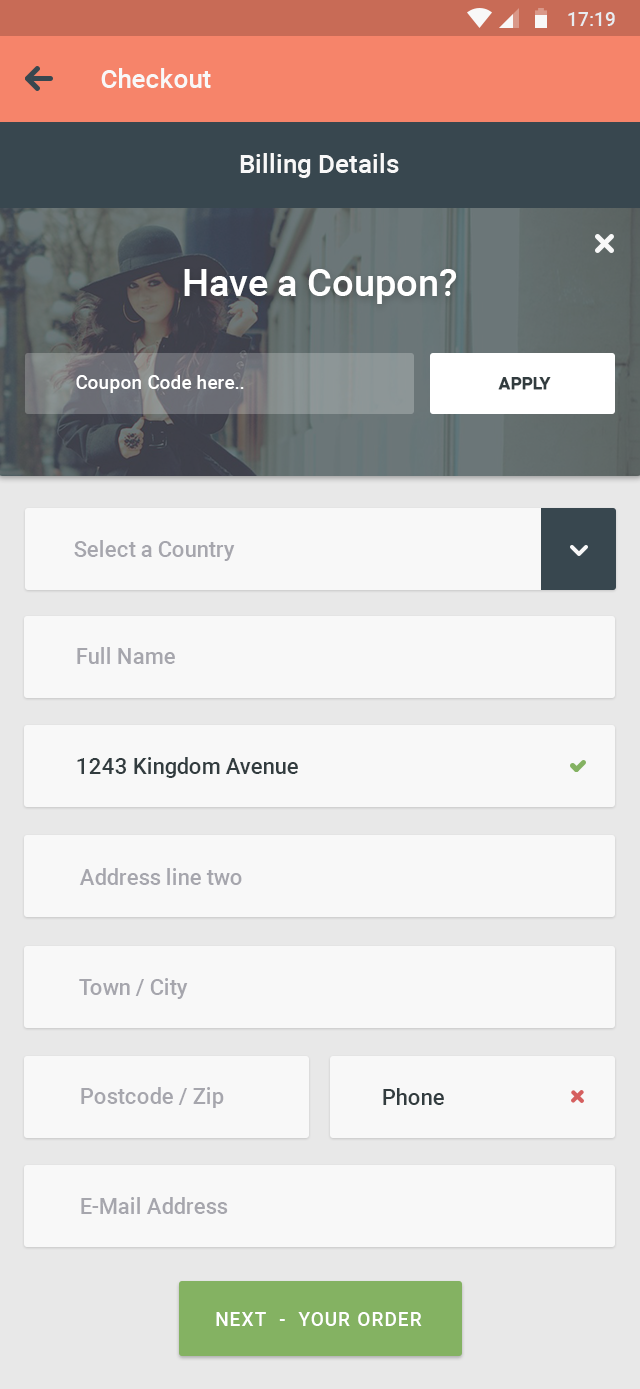
<style>
.page{position:relative;width:640px;height:1389px;background:#f8f8f8}
.page>*{position:absolute;margin:0}
.t1{font:19px "Roboto-Medium";color:#e8ecf0}
.t2{font:26px "Roboto-Medium";color:#f8f8f8}
.t3{font:38px "Roboto-Medium";color:#ffffff}
.t4{font:19px "Roboto-Medium";color:#ffffff}
.t5{font:17px "Roboto-Medium";color:#323c3f;font-weight:bold}
.t6{font:22px "Roboto-Medium";color:#a6a6ad}
.t7{font:22px "Roboto-Medium";color:#323c3f}
.t8{font:19px "Roboto-Medium";letter-spacing:0.06em;color:#ffffff;text-transform:uppercase}
</style>
<div class="page">
<p class="t1" style="left:568px;top:12px;width:47px;height:14px">17:19</p>
<p class="t2" style="left:101px;top:68px;width:110px;height:20px">Checkout</p>
<p class="t2" style="left:240px;top:153px;width:159px;height:25px">Billing Details</p>
<p class="t3" style="left:184px;top:269px;width:273px;height:35px">Have a Coupon?</p>
<p class="t4" style="left:76px;top:375px;width:168px;height:18px">Coupon Code here..</p>
<p class="t5" style="left:498px;top:377px;width:53px;height:13px">APPLY</p>
<p class="t6" style="left:74px;top:540px;width:161px;height:21px">Select a Country</p>
<p class="t6" style="left:77px;top:647px;width:98px;height:17px">Full Name</p>
<p class="t7" style="left:77px;top:757px;width:221px;height:21px">1243 Kingdom Avenue</p>
<p class="t6" style="left:79px;top:868px;width:163px;height:17px">Address line two</p>
<p class="t6" style="left:79px;top:978px;width:109px;height:21px">Town / City</p>
<p class="t6" style="left:81px;top:1087px;width:143px;height:21px">Postcode / Zip</p>
<p class="t7" style="left:383px;top:1088px;width:61px;height:17px">Phone</p>
<p class="t6" style="left:81px;top:1197px;width:147px;height:17px">E-Mail Address</p>
<p class="t8" style="left:216px;top:1312px;width:206px;height:14px">Next  -  your order</p>
</div>
